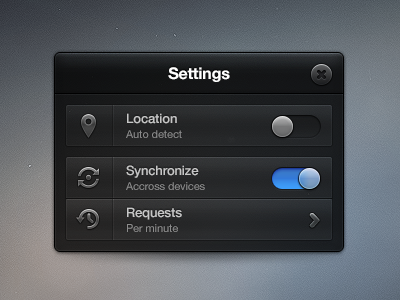
<style>
.page{position:relative;width:400px;height:300px}
.page>*{position:absolute;margin:0}
.t1{font:16px "HelveticaNeue-Bold";letter-spacing:-0.01em;color:#ffffff}
.t2{font:13px "HelveticaNeue-Medium";letter-spacing:-0.01em;color:#c6c6c6}
.t3{font:11px "HelveticaNeue";letter-spacing:-0.01em;color:#8a8a8a}
.t4{font:13px "HelveticaNeue-Medium";letter-spacing:-0.01em;color:#c6c7c7}
.t5{font:11px "HelveticaNeue";letter-spacing:-0.01em}
.t6{font:13px "HelveticaNeue-Medium";letter-spacing:-0.01em;color:#c7c7c7}
.t7{font:32.3px "GothamRounded-Bold";letter-spacing:-0.01em;color:#414547;scale:1.2 1}
.t8{font:11px "HelveticaNeue";letter-spacing:-0.01em;color:#8b8b8b}
</style>
<div class="page">
<p class="t1" style="left:168px;top:67px;width:62px;height:15px">Settings</p>
<p class="t2" style="left:127px;top:113px;width:50px;height:11px">Location</p>
<p class="t3" style="left:126px;top:130px;width:56px;height:8px">Auto detect</p>
<p class="t4" style="left:126px;top:165px;width:73px;height:13px">Synchronize</p>
<p class="t5" style="left:126px;top:182px;width:79px;height:8px">Accross devices</p>
<p class="t6" style="left:127px;top:207px;width:55px;height:13px">Requests</p>
<p class="t7" style="left:309px;top:213px;width:11px;height:15px">›</p>
<p class="t8" style="left:127px;top:224px;width:51px;height:8px">Per minute</p>
</div>
